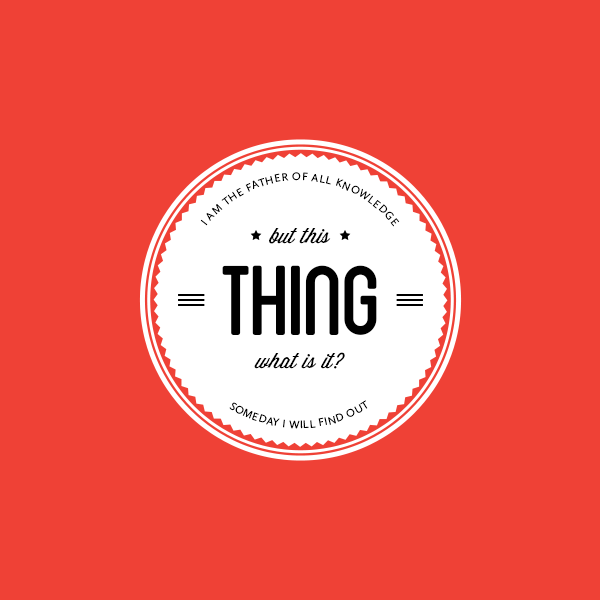
<style>
.page{position:relative;width:600px;height:600px;background:#ef4136}
.page>*{position:absolute;margin:0}
.t1{font:11px/6px "CallunaSans-Regular";letter-spacing:0.065em;color:#000000}
.t2{font:21px "WisdomScriptAI";color:#000000}
.t3{font:140px "Blanch-Caps";letter-spacing:-0.04em;color:#000000}
.t4{font:11px/6px "CallunaSans-Regular";letter-spacing:0.05em;color:#000000}
</style>
<div class="page">
<p class="t1" style="left:200px;top:172px;width:200px;height:55px;text-align:center">I AM THE FATHER OF ALL KNOWLEDGE</p>
<p class="t2" style="left:269px;top:228px;width:62px;height:16px">but this</p>
<p class="t3" style="left:222px;top:265px;width:155px;height:70px">THING</p>
<p class="t2" style="left:254px;top:352px;width:91px;height:17px">what is it?</p>
<p class="t4" style="left:229px;top:400px;width:139px;height:29px;text-align:center">SOMEDAY I WILL FIND OUT</p>
</div>
